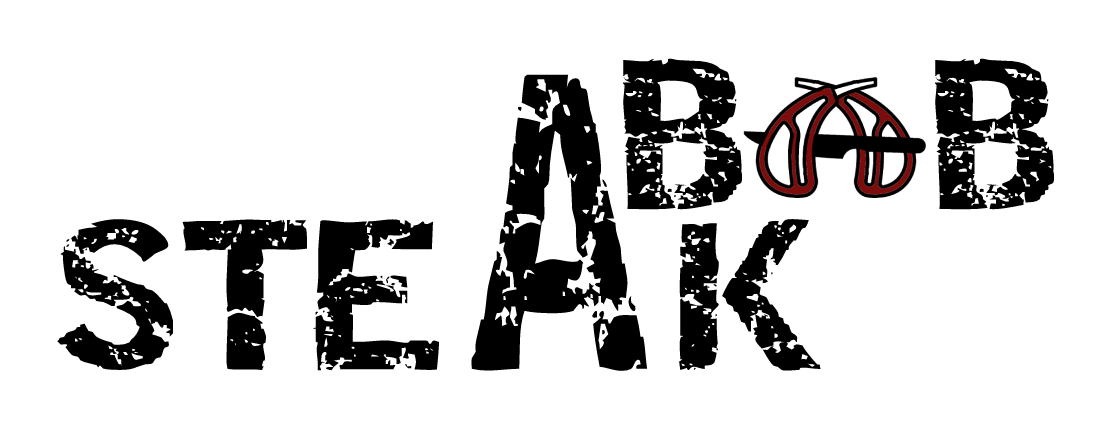
<style>
.page{position:relative;width:1106px;height:421px;background:#ffffff}
.page>*{position:absolute;margin:0}
.t1{font:150px "Destroy";color:#000000}
.t2{font:294.1px "Destroy";color:#000000;scale:0.61 1}
</style>
<div class="page">
<p class="t1" style="left:622px;top:58px;width:121px;height:152px">B</p>
<p class="t1" style="left:934px;top:58px;width:121px;height:152px">B</p>
<p class="t2" style="left:471px;top:74px;width:177px;height:297px">A</p>
<p class="t1" style="left:57px;top:219px;width:383px;height:152px">STE</p>
<p class="t1" style="left:679px;top:219px;width:142px;height:152px">K</p>
</div>
